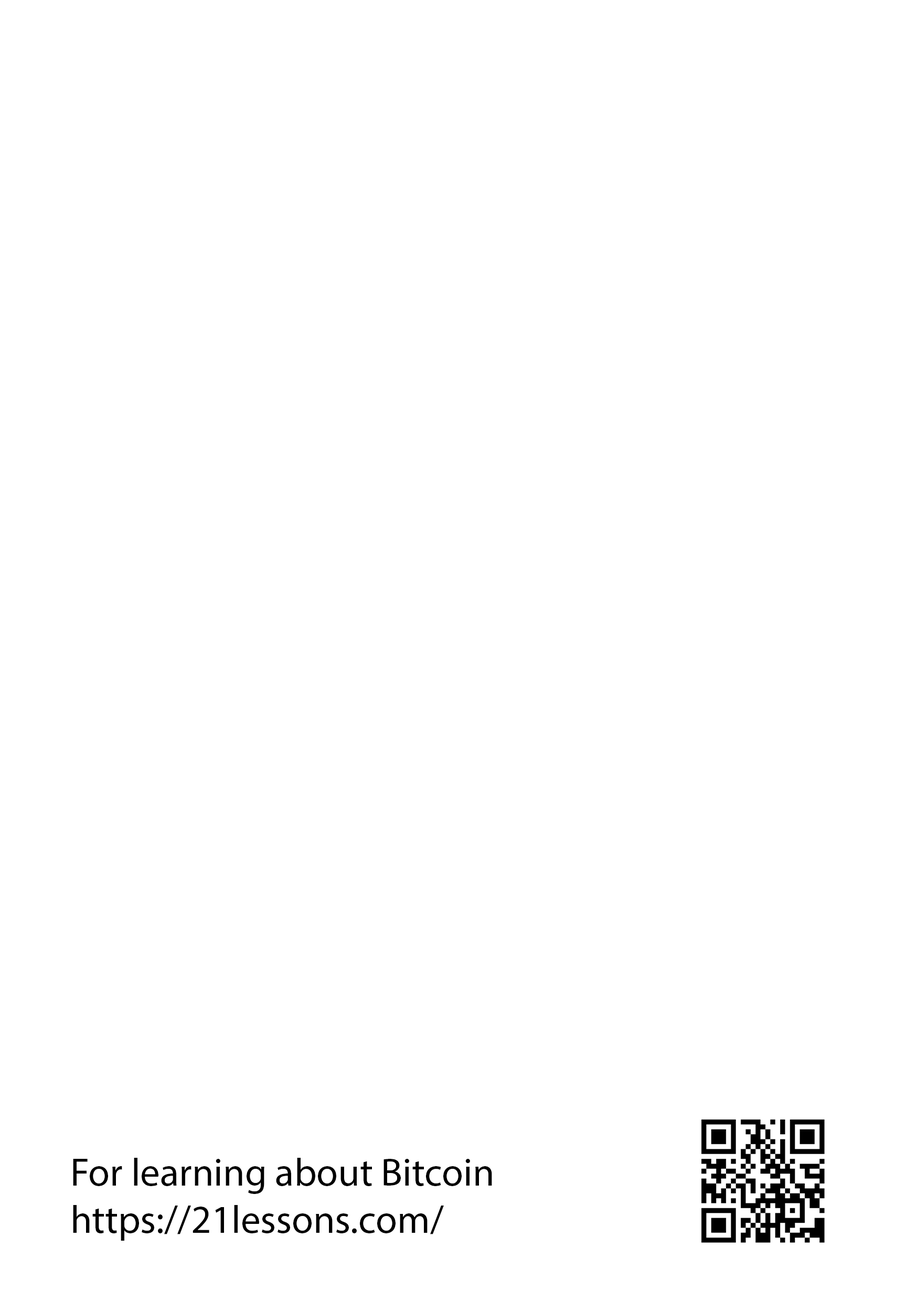
<style>
.page{position:relative;width:917px;height:1301px;background:#ffffff}
.page>*{position:absolute;margin:0}
.t1{font:39.3px "MyriadPro-Regular";color:#000000}
</style>
<div class="page">
<p class="t1" style="left:73px;top:1158px;width:419px;height:82px">For learning about Bitcoin<br>https://21lessons.com/</p>
</div>
